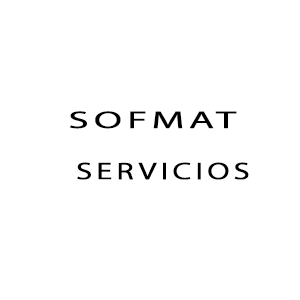
<style>
.page{position:relative;width:300px;height:300px;background:#ffffff}
.page>*{position:absolute;margin:0}
.t1{font:24px "MyriadPro-Regular";letter-spacing:0.1em;color:#000000;font-weight:bold;scale:1.7 1}
.t2{font:24px "MyriadPro-Regular";letter-spacing:0.1em;color:#000000;font-weight:bold;scale:1.35 1}
</style>
<div class="page">
<p class="t1" style="left:70px;top:111px;width:167px;height:18px">SOFMAT</p>
<p class="t2" style="left:77px;top:162px;width:172px;height:18px">SERVICIOS</p>
</div>
